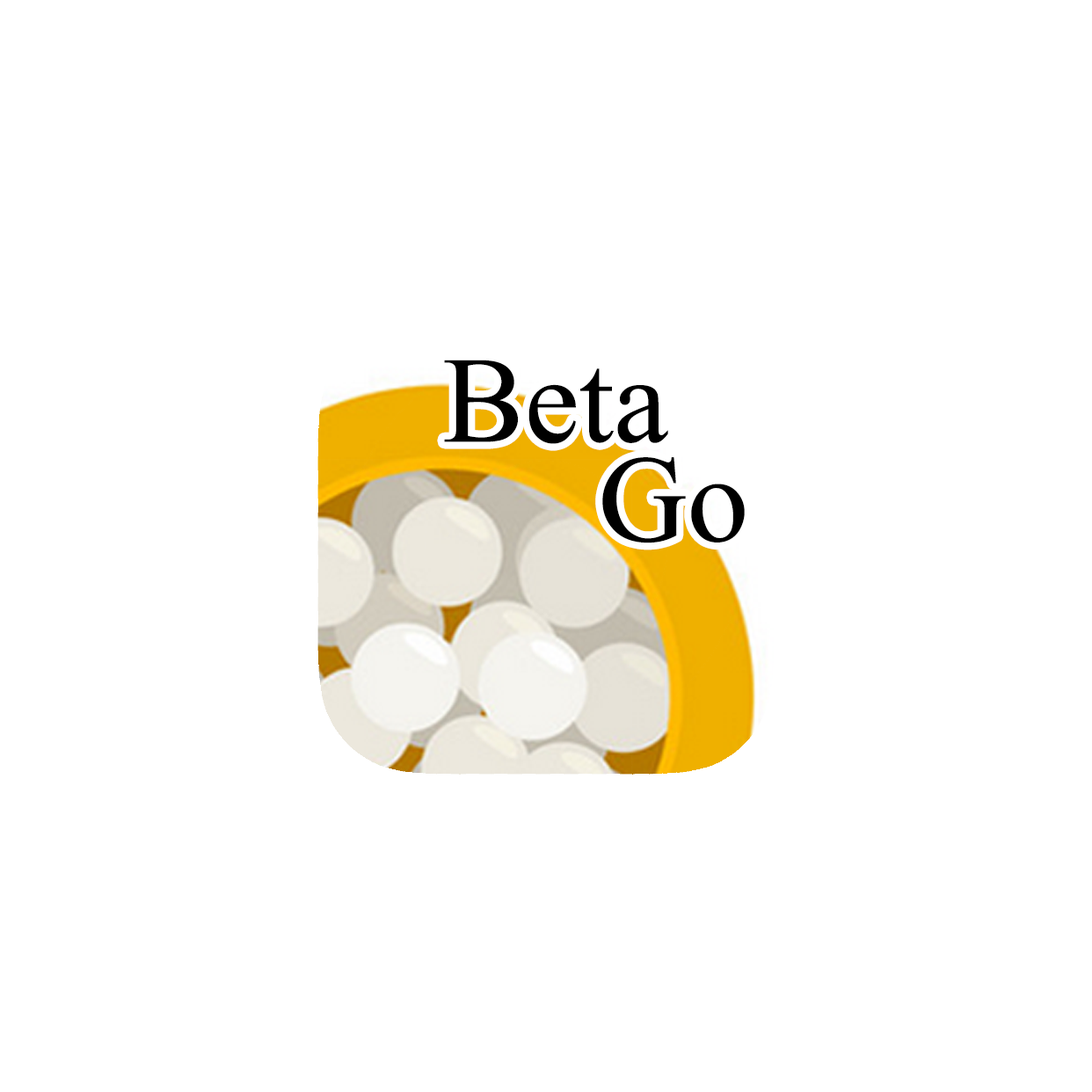
<style>
.page{position:relative;width:1092px;height:1092px;background:#ffffff}
.page>*{position:absolute;margin:0}
.t1{font:123.1px "TimesNewRomanPSMT";color:#000000}
</style>
<div class="page">
<p class="t1" style="left:444px;top:360px;width:224px;height:84px">Beta</p>
<p class="t1" style="left:602px;top:457px;width:143px;height:86px">Go</p>
</div>
